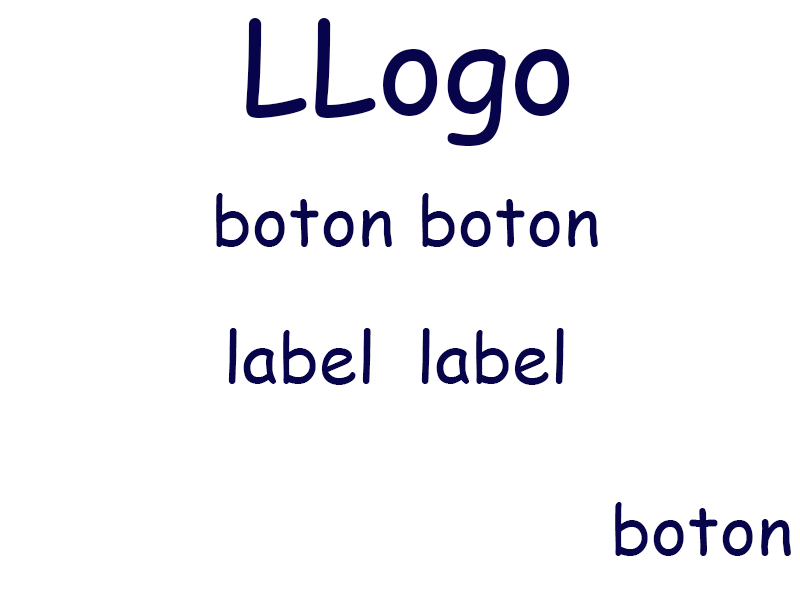
<style>
.page{position:relative;width:800px;height:600px;background:#ffffff}
.page>*{position:absolute;margin:0}
.t1{font:125px "ComicSansMS";color:#07044b}
.t2{font:69.4px "ComicSansMS";color:#07044b}
</style>
<div class="page">
<p class="t1" style="left:246px;top:18px;width:324px;height:128px">LLogo</p>
<p class="t2" style="left:216px;top:193px;width:176px;height:54px">boton</p>
<p class="t2" style="left:422px;top:193px;width:176px;height:54px">boton</p>
<p class="t2" style="left:228px;top:328px;width:143px;height:57px">label</p>
<p class="t2" style="left:421px;top:328px;width:143px;height:57px">label</p>
<p class="t2" style="left:615px;top:502px;width:176px;height:54px">boton</p>
</div>
